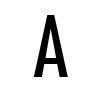
<style>
.page{position:relative;width:100px;height:100px;background:#ffffff}
.page>*{position:absolute;margin:0}
.t1{font:100px "TwCenMT-Condensed";color:#000000}
</style>
<div class="page">
<p class="t1" style="left:33px;top:15px;width:35px;height:62px">A</p>
</div>
